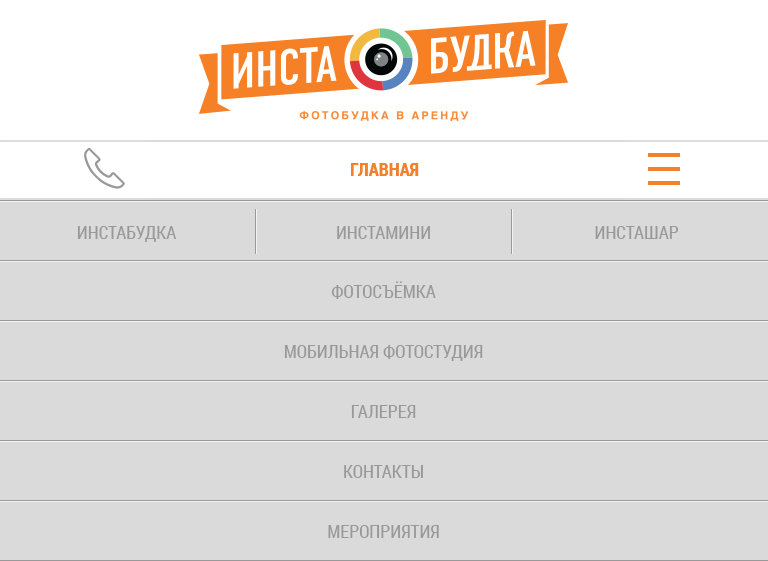
<style>
.page{position:relative;width:768px;height:561px;background:#dadada}
.page>*{position:absolute;margin:0}
.t1{font:18px "RobotoCondensed-Bold";color:#f58026}
.t2{font:18px "RobotoCondensed-Regular";color:#999999;text-transform:uppercase}
</style>
<div class="page">
<p class="t1" style="left:351px;top:163px;width:68px;height:13px">ГЛАВНАЯ</p>
<p class="t1" style="left:351px;top:163px;width:68px;height:13px">ГЛАВНАЯ</p>
<p class="t2" style="left:77px;top:226px;width:99px;height:16px">Инстабудка</p>
<p class="t2" style="left:337px;top:226px;width:93px;height:13px">Инстамини</p>
<p class="t2" style="left:595px;top:226px;width:84px;height:13px">Инсташар</p>
<p class="t2" style="left:331px;top:281px;width:105px;height:18px">фотосъёмка</p>
<p class="t2" style="left:284px;top:345px;width:199px;height:16px">мобильная фотостудия</p>
<p class="t2" style="left:351px;top:405px;width:65px;height:13px">галерея</p>
<p class="t2" style="left:344px;top:465px;width:79px;height:13px">контакты</p>
<p class="t2" style="left:328px;top:525px;width:111px;height:13px">мероприятия</p>
</div>
